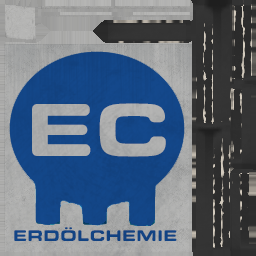
<style>
.page{position:relative;width:256px;height:256px}
.page>*{position:absolute;margin:0}
.t1{font:78px "EurostileRoundExtended-Black";color:#b6b6b5}
.t2{font:16px "EurostileRoundExtended-Black";color:#13478a}
</style>
<div class="page">
<p class="t1" style="left:32px;top:103px;width:134px;height:54px">EC</p>
<p class="t2" style="left:14px;top:227px;width:163px;height:14px">ERDÖLCHEMIE</p>
</div>
